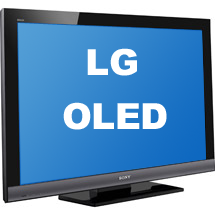
<style>
.page{position:relative;width:215px;height:215px}
.page>*{position:absolute;margin:0}
.t1{font:36px "Arial-Black";letter-spacing:-0.025em;color:#ffffff}
</style>
<div class="page">
<p class="t1" style="left:87px;top:48px;width:50px;height:28px">LG</p>
<p class="t1" style="left:63px;top:102px;width:104px;height:28px">OLED</p>
</div>
